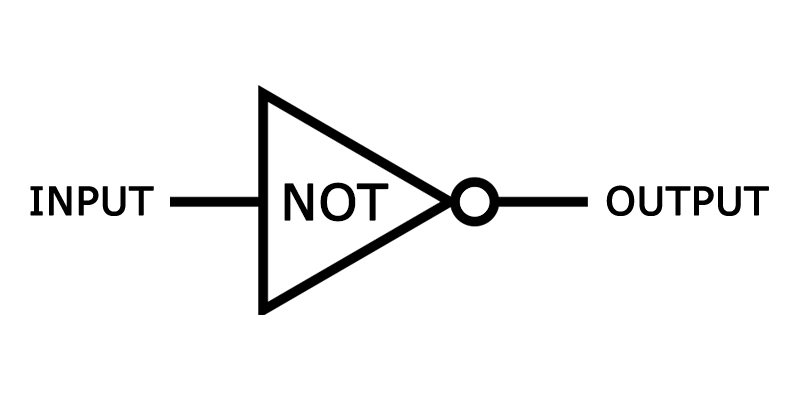
<style>
.page{position:relative;width:800px;height:400px;background:#ffffff}
.page>*{position:absolute;margin:0}
.t1{font:49.2px "Verdana";color:#000000;font-weight:bold}
.t2{font:38.6px "Verdana";color:#000000;font-weight:bold}
</style>
<div class="page">
<p class="t1" style="left:284px;top:182px;width:105px;height:40px">NOT</p>
<p class="t2" style="left:606px;top:185px;width:163px;height:31px">OUTPUT</p>
<p class="t2" style="left:30px;top:186px;width:124px;height:30px">INPUT</p>
</div>
